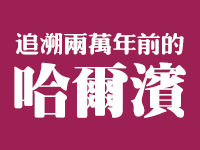
<style>
.page{position:relative;width:200px;height:150px;background:#9c2054}
.page>*{position:absolute;margin:0}
.t1{font:23.7px "¾­µä·±·ÂÔ² Regular";color:#ffffff}
.t2{font:58px "¾­µä·±³¬ËÎ Regular";color:#ffffff}
</style>
<div class="page">
<p class="t1" style="left:15px;top:32px;width:169px;height:23px">追溯两万年前的</p>
<p class="t2" style="left:14px;top:62px;width:172px;height:56px">哈尔滨</p>
</div>
